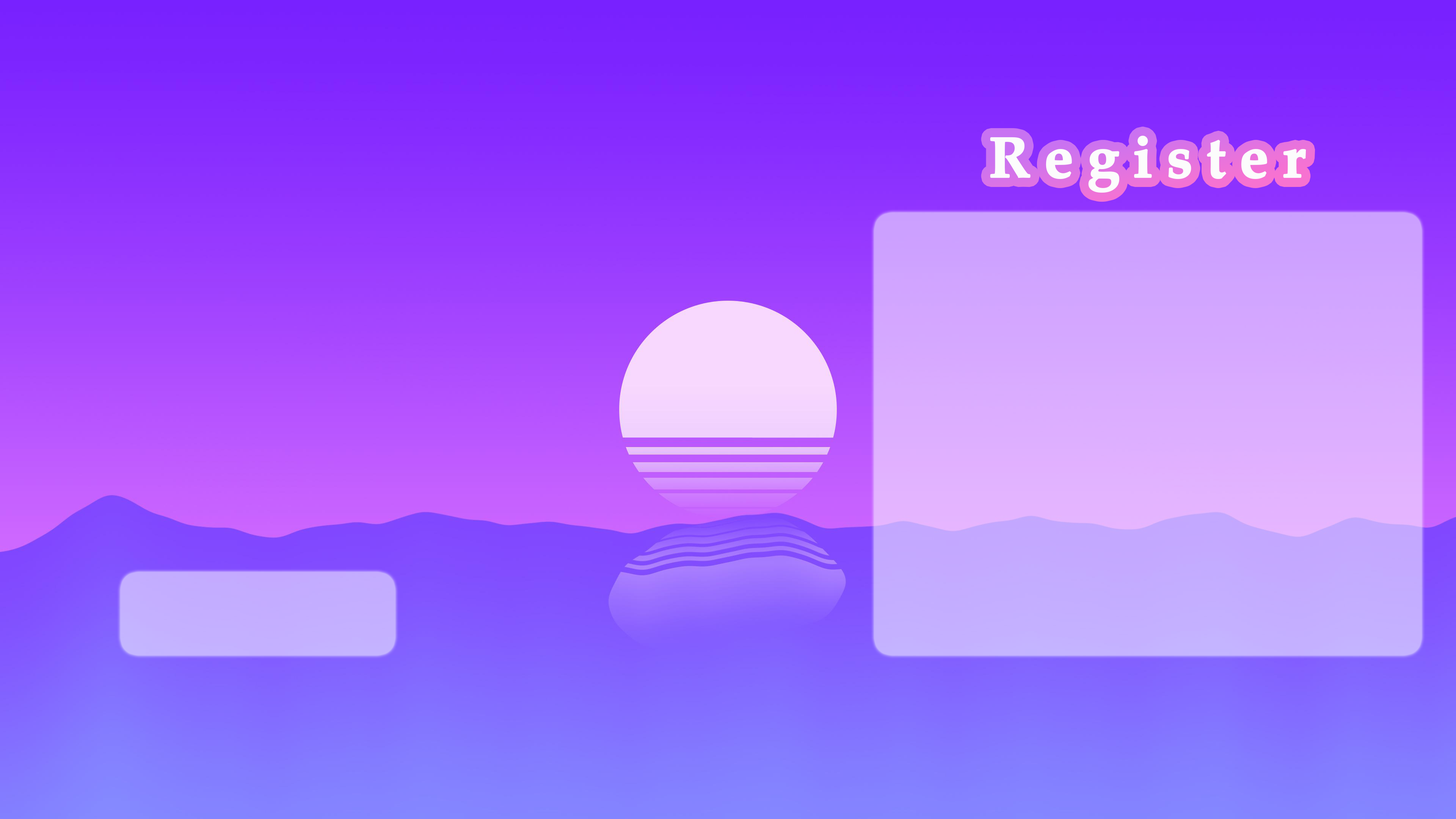
<style>
.page{position:relative;width:1456px;height:819px}
.page>*{position:absolute;margin:0}
.t1{font:56.9px "PalatinoLinotype-Bold";letter-spacing:0.22em;color:#fcfcfc;font-weight:bold}
</style>
<div class="page">
<p class="t1" style="left:990px;top:135px;width:316px;height:58px">Register</p>
</div>
